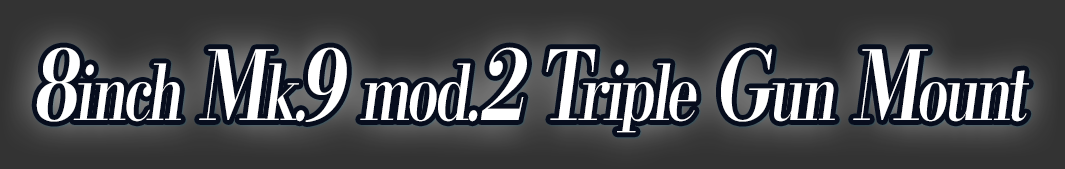
<style>
.page{position:relative;width:1065px;height:169px;background:#333333}
.page>*{position:absolute;margin:0}
.t1{font:76.8px "KochoStd-Heavy";letter-spacing:-0.06em;color:#ffffff;font-style:italic;scale:0.75 1}
.t2{font:96px "KochoStd-Heavy";letter-spacing:-0.06em;color:#ffffff;font-style:italic;scale:0.75 1}
</style>
<div class="page">
<p class="t1" style="left:36px;top:47px;width:993px;height:86px"><span class="t2">8</span>inch<span class="t2"> M</span>k.<span class="t2">9 </span>mod.<span class="t2">2 T</span>riple<span class="t2"> G</span>un<span class="t2"> M</span>ount</p>
</div>
